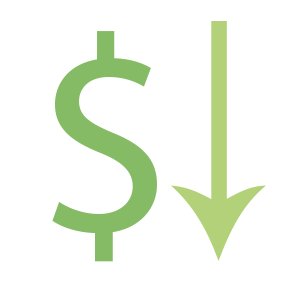
<style>
.page{position:relative;width:290px;height:290px;background:#ffffff}
.page>*{position:absolute;margin:0}
.t1{font:280px "MyriadPro-Regular";color:#85bb65}
</style>
<div class="page">
<p class="t1" style="left:52px;top:31px;width:105px;height:231px">$</p>
</div>
